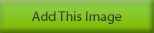
<style>
.page{position:relative;width:154px;height:33px}
.page>*{position:absolute;margin:0}
.t1{font:14px "MyriadPro-Regular";color:#344918}
</style>
<div class="page">
<p class="t1" style="left:32px;top:11px;width:90px;height:13px">Add This Image</p>
</div>
